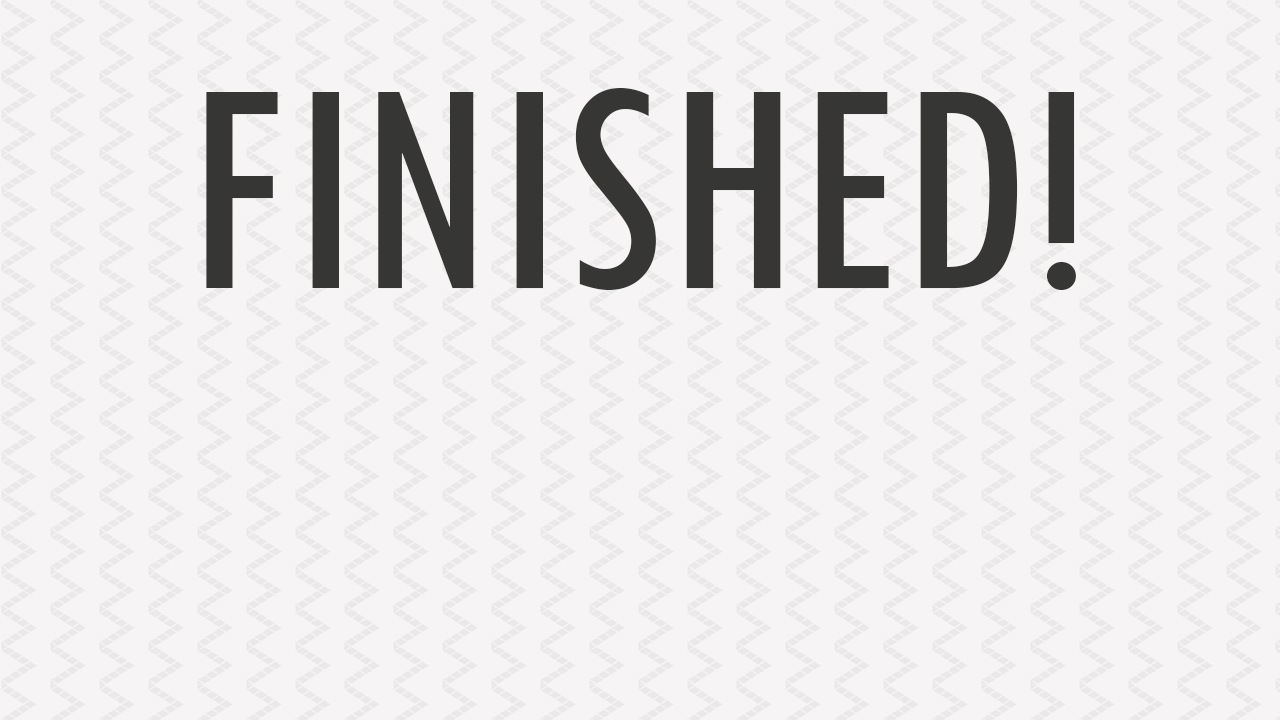
<style>
.page{position:relative;width:1280px;height:720px;background:#f6f4f4}
.page>*{position:absolute;margin:0}
.t1{font:315px "TwCenMT-Condensed";color:#363635}
</style>
<div class="page">
<p class="t1" style="left:206px;top:88px;width:870px;height:202px">FINISHED!</p>
</div>
